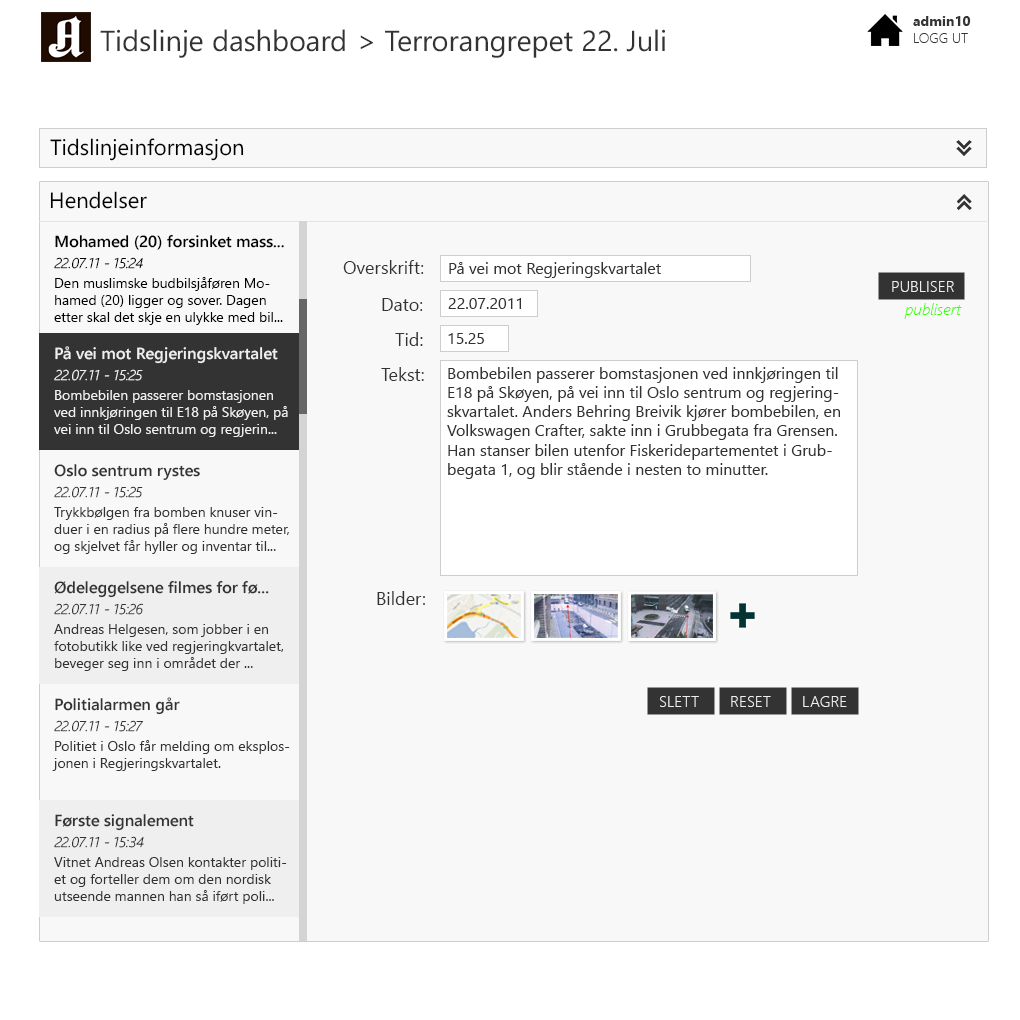
<style>
.page{position:relative;width:1020px;height:1020px;background:#f8f8f8}
.page>*{position:absolute;margin:0}
.t1{font:14px "SegoeUI-Bold";color:#333333}
.t2{font:29px "SegoeUI";color:#333333}
.t3{font:14px "SegoeUI-Light";color:#333333}
.t4{font:22px "SegoeUI";color:#000000}
.t5{font:16px "SegoeUI-Semibold";color:#000000}
.t6{font:14px "SegoeUI-LightItalic";color:#000000}
.t7{font:18px "SegoeUI";color:#333333}
.t8{font:16px "SegoeUI";color:#333333}
.t9{font:14px "SegoeUI";color:#000000}
.t10{font:16px "SegoeUI-Light";color:#efefef}
.t11{font:16px "SegoeUI-LightItalic";color:#3cff00}
.t12{font:16px "SegoeUI-Semibold";color:#efefef}
.t13{font:14px "SegoeUI-LightItalic";color:#efefef}
.t14{font:14px "SegoeUI";color:#efefef}
.t15{font:16px "SegoeUI-Semibold";color:#333333}
.t16{font:14px "SegoeUI-LightItalic";color:#333333}
.t17{font:14px "SegoeUI";color:#333333}
</style>
<div class="page">
<p class="t1" style="left:913px;top:16px;width:58px;height:10px">admin10</p>
<p class="t2" style="left:100px;top:29px;width:245px;height:29px">Tidslinje dashboard</p>
<p class="t2" style="left:360px;top:29px;width:305px;height:29px">&gt; Terrorangrepet 22. Juli</p>
<p class="t3" style="left:914px;top:33px;width:54px;height:10px">LOGG UT</p>
<p class="t4" style="left:50px;top:138px;width:194px;height:23px">Tidslinjeinformasjon</p>
<p class="t4" style="left:50px;top:191px;width:97px;height:18px">Hendelser</p>
<p class="t5" style="left:55px;top:234px;width:229px;height:16px">Mohamed (20) forsinket mass...</p>
<p class="t6" style="left:54px;top:257px;width:89px;height:12px">22.07.11 - 15:24</p>
<p class="t7" style="left:343px;top:260px;width:81px;height:14px">Overskrift:</p>
<p class="t8" style="left:449px;top:262px;width:212px;height:16px">På vei mot Regjeringskvartalet</p>
<p class="t9" style="left:54px;top:277px;width:229px;height:48px">Den muslimske budbilsjåføren Mohamed (20) ligger og sover. Dagen etter skal det skje en ulykke med bil...</p>
<p class="t10" style="left:892px;top:281px;width:62px;height:11px">PUBLISER</p>
<p class="t7" style="left:382px;top:298px;width:41px;height:13px">Dato:</p>
<p class="t8" style="left:448px;top:298px;width:73px;height:11px">22.07.2011</p>
<p class="t11" style="left:904px;top:303px;width:58px;height:16px">publisert</p>
<p class="t7" style="left:395px;top:332px;width:28px;height:14px">Tid:</p>
<p class="t8" style="left:448px;top:333px;width:36px;height:11px">15.25</p>
<p class="t12" style="left:55px;top:346px;width:223px;height:18px">På vei mot Regjeringskvartalet</p>
<p class="t13" style="left:54px;top:369px;width:89px;height:12px">22.07.11 - 15:25</p>
<p class="t7" style="left:381px;top:367px;width:43px;height:14px">Tekst:</p>
<p class="t8" style="left:447px;top:367px;width:393px;height:112px">Bombebilen passerer bomstasjonen ved innkjøringen til E18 på Skøyen, på vei inn til Oslo sentrum og regjeringskvartalet. Anders Behring Breivik kjører bombebilen, en Volkswagen Crafter, sakte inn i Grubbegata fra Grensen. Han stanser bilen utenfor Fiskeridepartementet i Grubbegata 1, og blir stående i nesten to minutter.</p>
<p class="t14" style="left:54px;top:390px;width:234px;height:47px">Bombebilen passerer bomstasjonen ved innkjøringen til E18 på Skøyen, på vei inn til Oslo sentrum og regjerin...</p>
<p class="t15" style="left:54px;top:464px;width:146px;height:17px">Oslo sentrum rystes</p>
<p class="t16" style="left:54px;top:486px;width:89px;height:12px">22.07.11 - 15:25</p>
<p class="t17" style="left:54px;top:507px;width:235px;height:47px">Trykkbølgen fra bomben knuser vinduer i en radius på flere hundre meter, og skjelvet får hyller og inventar til...</p>
<p class="t15" style="left:54px;top:580px;width:215px;height:18px">Ødeleggelsene filmes for fø...</p>
<p class="t7" style="left:377px;top:591px;width:48px;height:14px">Bilder:</p>
<p class="t16" style="left:54px;top:603px;width:90px;height:12px">22.07.11 - 15:26</p>
<p class="t17" style="left:54px;top:624px;width:230px;height:47px">Andreas Helgesen, som jobber i en fotobutikk like ved regjeringkvartalet, beveger seg inn i området der ...</p>
<p class="t15" style="left:55px;top:697px;width:125px;height:18px">Politialarmen går</p>
<p class="t10" style="left:660px;top:696px;width:39px;height:11px">SLETT</p>
<p class="t10" style="left:731px;top:696px;width:40px;height:11px">RESET</p>
<p class="t10" style="left:803px;top:696px;width:44px;height:11px">LAGRE</p>
<p class="t16" style="left:54px;top:720px;width:90px;height:12px">22.07.11 - 15:27</p>
<p class="t17" style="left:52px;top:740px;width:238px;height:31px">Politiet i Oslo får melding om eksplosjonen i Regjeringskvartalet.</p>
<p class="t15" style="left:55px;top:814px;width:139px;height:17px">Første signalement</p>
<p class="t16" style="left:54px;top:836px;width:90px;height:12px">22.07.11 - 15:34</p>
<p class="t17" style="left:54px;top:857px;width:233px;height:47px">Vitnet Andreas Olsen kontakter politiet og forteller dem om den nordisk utseende mannen han så iført poli...</p>
</div>
